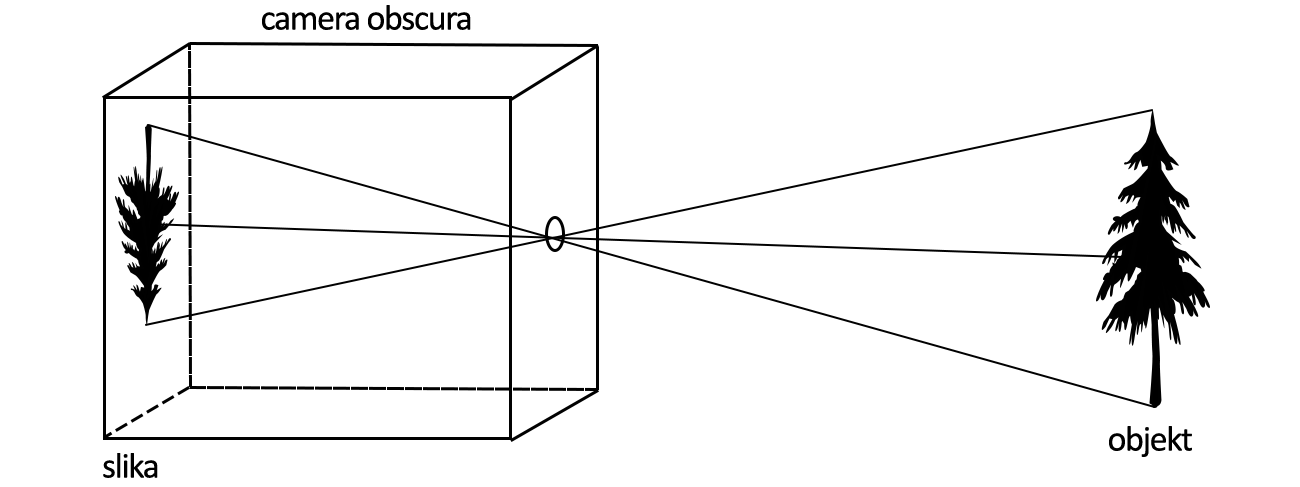
<style>
.page{position:relative;width:1300px;height:487px;background:#ffffff}
.page>*{position:absolute;margin:0}
.t1{font:36px "Calibri";letter-spacing:-0.04em;color:#000000}
</style>
<div class="page">
<p class="t1" style="left:262px;top:5px;width:209px;height:25px">camera obscura</p>
<p class="t1" style="left:1109px;top:426px;width:83px;height:31px">objekt</p>
<p class="t1" style="left:103px;top:453px;width:55px;height:25px">slika</p>
</div>
